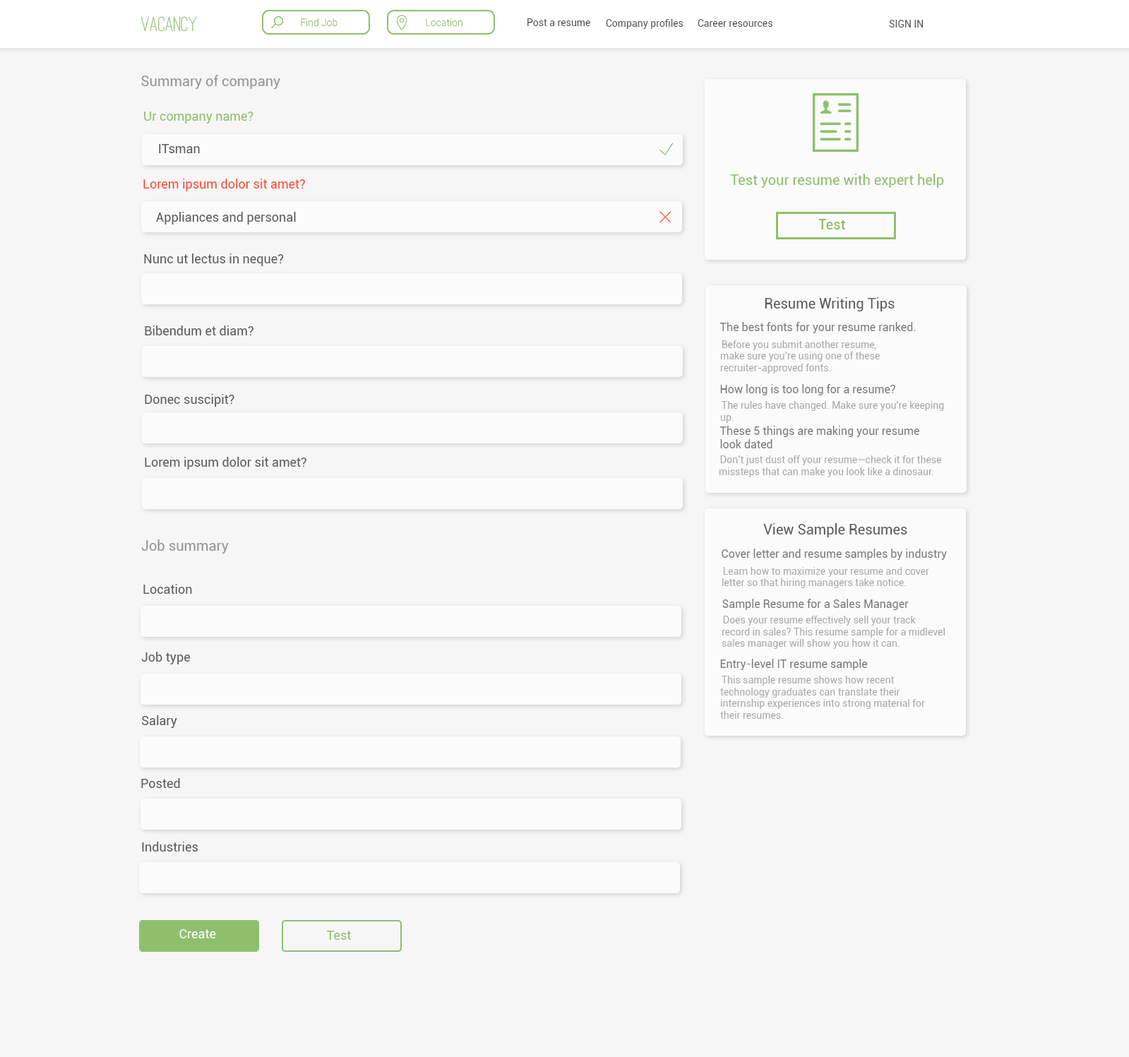
<style>
.page{position:relative;width:1129px;height:1057px;background:#f6f6f6}
.page>*{position:absolute;margin:0}
.t1{font:21.2px "OstrichSans-Medium";color:#8ec06c}
.t2{font:9.9px "Roboto-Light";color:#8ec06c}
.t3{font:9.9px "Roboto-Regular";color:#565454}
.t4{font:14.1px "Roboto-Regular";color:#979595}
.t5{font:12.7px "Roboto-Regular";color:#8ec06c}
.t6{font:12.7px "Roboto-Regular";color:#5d5c5c}
.t7{font:14.1px "Roboto-Regular";color:#8ec06c}
.t8{font:12.7px "Roboto-Regular";color:#ff492f}
.t9{font:14.1px "Roboto-Medium";color:#8ec06c}
.t10{font:14.1px "Roboto-Regular";color:#5d5c5c}
.t11{font:11.3px "Roboto-Regular";color:#7d7c7c}
.t12{font:9.9px "Roboto-Regular";color:#aaaaaa}
.t13{font:12.7px "Roboto-Regular";color:#f8f8f8}
</style>
<div class="page">
<p class="t1" style="left:141px;top:16px;width:56px;height:16px">VACANCY</p>
<p class="t2" style="left:301px;top:18px;width:36px;height:8px">Find Job</p>
<p class="t2" style="left:426px;top:18px;width:36px;height:8px">Location</p>
<p class="t3" style="left:527px;top:18px;width:63px;height:8px">Post a resume</p>
<p class="t3" style="left:606px;top:19px;width:77px;height:10px">Company profiles</p>
<p class="t3" style="left:697px;top:19px;width:75px;height:8px">Career resources</p>
<p class="t3" style="left:889px;top:20px;width:34px;height:8px">SIGN IN</p>
<p class="t4" style="left:141px;top:75px;width:139px;height:14px">Summary of company</p>
<p class="t5" style="left:144px;top:112px;width:109px;height:12px"><span class="t4"><br><br><br></span>Ur company name?</p>
<p class="t6" style="left:159px;top:144px;width:41px;height:9px">ITsman</p>
<p class="t7" style="left:730px;top:174px;width:214px;height:14px">Test your resume with expert help</p>
<p class="t8" style="left:143px;top:179px;width:162px;height:12px">Lorem ipsum dolor sit amet?</p>
<p class="t6" style="left:156px;top:212px;width:140px;height:12px">Appliances and personal</p>
<p class="t9" style="left:818px;top:219px;width:27px;height:10px">Test</p>
<p class="t6" style="left:144px;top:253px;width:140px;height:13px">Nunc ut lectus in neque?</p>
<p class="t10" style="left:764px;top:297px;width:130px;height:14px">Resume Writing Tips</p>
<p class="t6" style="left:145px;top:325px;width:108px;height:10px">Bibendum et diam?</p>
<p class="t11" style="left:719px;top:322px;width:196px;height:11px">The best fonts for your resume ranked.</p>
<p class="t12" style="left:720px;top:340px;width:159px;height:33px">Before you submit another resume, <br>make sure you’re using one of these recruiter-approved fonts.</p>
<p class="t11" style="left:720px;top:384px;width:175px;height:11px">How long is too long for a resume?</p>
<p class="t6" style="left:145px;top:394px;width:89px;height:13px">Donec suscipit?</p>
<p class="t12" style="left:720px;top:401px;width:224px;height:22px">The rules have changed. Make sure you're keeping up.</p>
<p class="t11" style="left:719px;top:426px;width:200px;height:22px">These 5 things are making your resume <br>look dated</p>
<p class="t6" style="left:145px;top:457px;width:161px;height:12px">Lorem ipsum dolor sit amet?</p>
<p class="t12" style="left:719px;top:455px;width:223px;height:22px">Don’t just dust off your resume—check it for these missteps that can make you look like a dinosaur.</p>
<p class="t10" style="left:763px;top:523px;width:144px;height:14px">View Sample Resumes</p>
<p class="t4" style="left:141px;top:539px;width:88px;height:14px">Job summary</p>
<p class="t11" style="left:721px;top:548px;width:225px;height:12px">Cover letter and resume samples by industry</p>
<p class="t12" style="left:722px;top:567px;width:207px;height:21px">Learn how to maximize your resume and cover letter so that hiring managers take notice.</p>
<p class="t6" style="left:143px;top:584px;width:49px;height:10px">Location</p>
<p class="t11" style="left:722px;top:599px;width:186px;height:11px">Sample Resume for a Sales Manager</p>
<p class="t12" style="left:721px;top:615px;width:224px;height:34px">Does your resume effectively sell your track record in sales? This resume sample for a midlevel sales manager will show you how it can.</p>
<p class="t6" style="left:141px;top:651px;width:50px;height:13px">Job type</p>
<p class="t11" style="left:720px;top:659px;width:147px;height:11px">Entry-level IT resume sample</p>
<p class="t12" style="left:720px;top:675px;width:205px;height:44px">This sample resume shows how recent technology graduates can translate their internship experiences into strong material for their resumes.</p>
<p class="t6" style="left:141px;top:715px;width:36px;height:13px">Salary</p>
<p class="t6" style="left:141px;top:778px;width:39px;height:10px">Posted</p>
<p class="t6" style="left:142px;top:841px;width:56px;height:10px">Industries</p>
<p class="t13" style="left:179px;top:929px;width:37px;height:9px">Create</p>
<p class="t5" style="left:326px;top:930px;width:25px;height:9px">Test</p>
</div>
